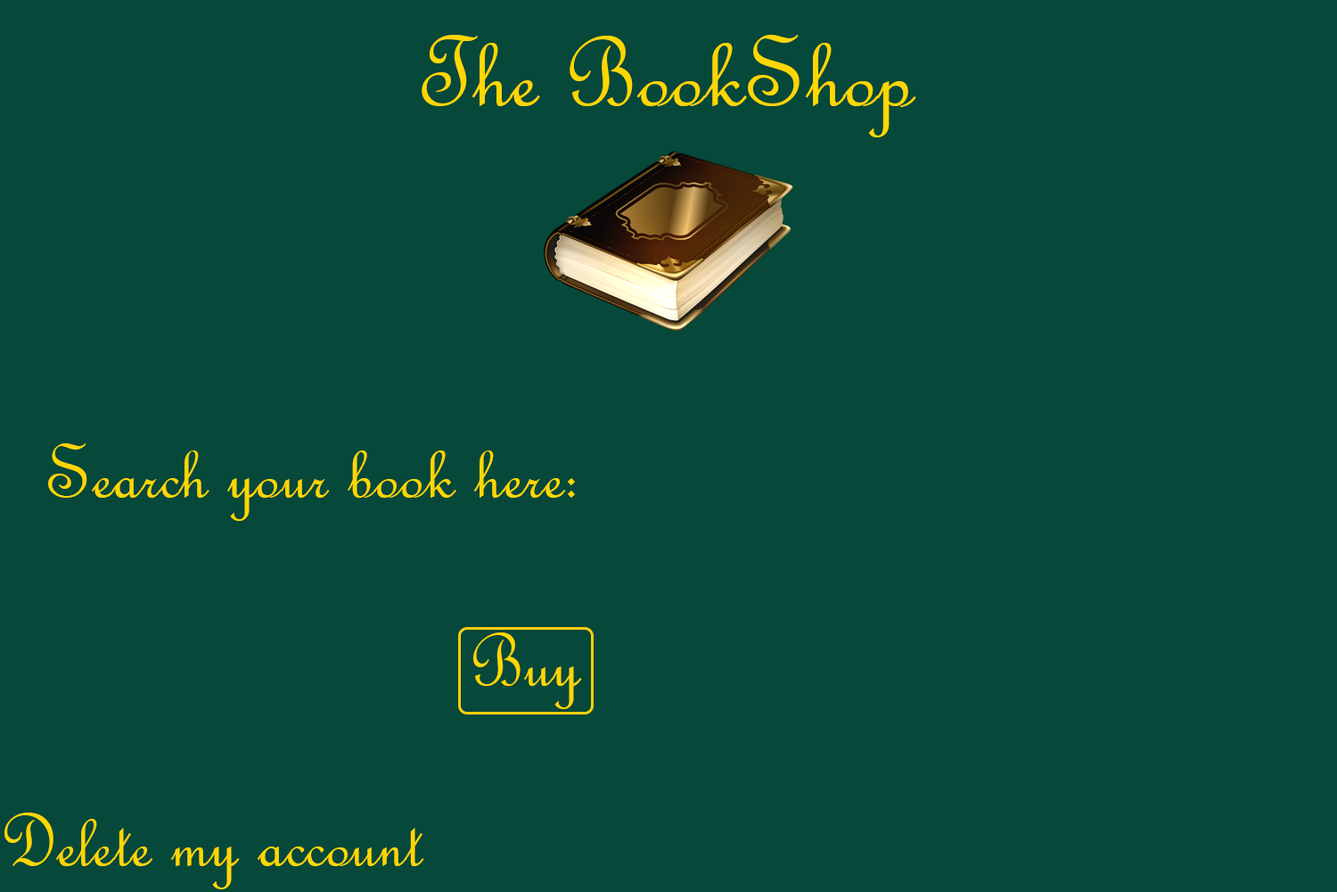
<style>
.page{position:relative;width:1337px;height:892px;background:#06483a}
.page>*{position:absolute;margin:0}
.t1{font:107px "FrenchScriptMT";color:#ffd700}
.t2{font:80.2px "FrenchScriptMT";color:#ffd700}
</style>
<div class="page">
<p class="t1" style="left:422px;top:35px;width:495px;height:102px">The BookShop</p>
<p class="t2" style="left:48px;top:443px;width:527px;height:78px">Search your book here:</p>
<p class="t2" style="left:473px;top:632px;width:109px;height:77px">Buy</p>
<p class="t2" style="left:4px;top:812px;width:420px;height:77px">Delete my account</p>
</div>
